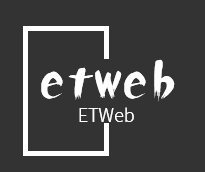
<style>
.page{position:relative;width:205px;height:172px;background:#333333}
.page>*{position:absolute;margin:0}
.t1{font:55.1px "FYBYT-";color:#ffffff}
.t2{font:18px "SourceHanSansCN-Light";color:#ffffff}
</style>
<div class="page">
<p class="t1" style="left:41px;top:59px;width:134px;height:43px">etweb</p>
<p class="t2" style="left:79px;top:107px;width:55px;height:15px">ETWeb</p>
</div>
